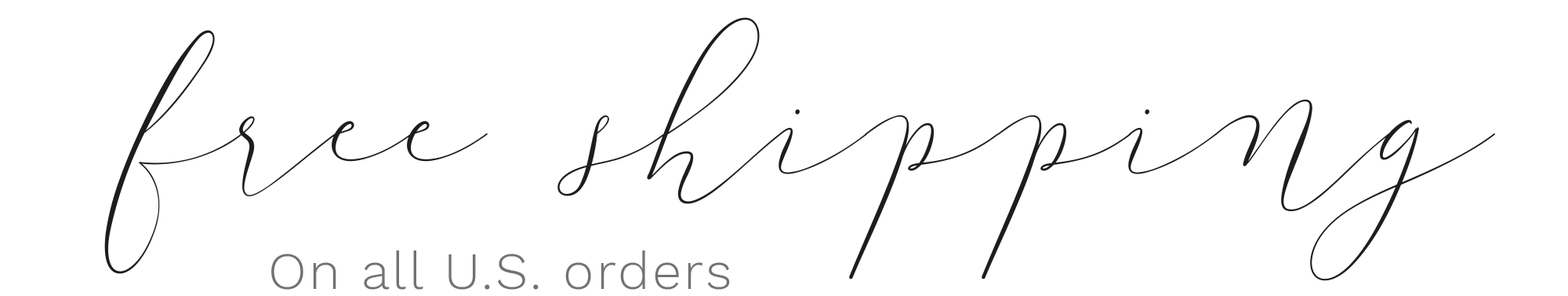
<style>
.page{position:relative;width:1568px;height:296px;background:#ffffff}
.page>*{position:absolute;margin:0}
.t1{font:225.4px "Anter";color:#1d1d1d}
.t2{font:52.3px "WorkSans-Light";letter-spacing:0.05em;color:#727272}
</style>
<div class="page">
<p class="t1" style="left:104px;top:17px;width:1391px;height:264px">free shipping</p>
<p class="t2" style="left:271px;top:250px;width:459px;height:39px">On all U.S. orders</p>
</div>
